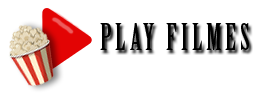
<style>
.page{position:relative;width:254px;height:93px;background:#ffffff}
.page>*{position:absolute;margin:0}
.t1{font:36px "BirchStd";letter-spacing:0.1em;color:#000000;text-transform:uppercase}
</style>
<div class="page">
<p class="t1" style="left:100px;top:23px;width:149px;height:27px">Play filmes</p>
</div>
